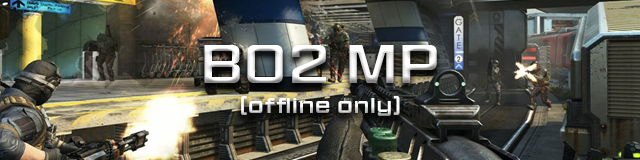
<style>
.page{position:relative;width:640px;height:160px}
.page>*{position:absolute;margin:0}
.t1{font:50px "HitmarkerNormal-Regular";letter-spacing:0.12em;color:#ffffff}
.t2{font:20px "HitmarkerNormal-Regular";letter-spacing:0.12em}
</style>
<div class="page">
<p class="t1" style="left:204px;top:45px;width:233px;height:38px">BO2 MP</p>
<p class="t2" style="left:241px;top:96px;width:159px;height:20px">(offline only)</p>
</div>
